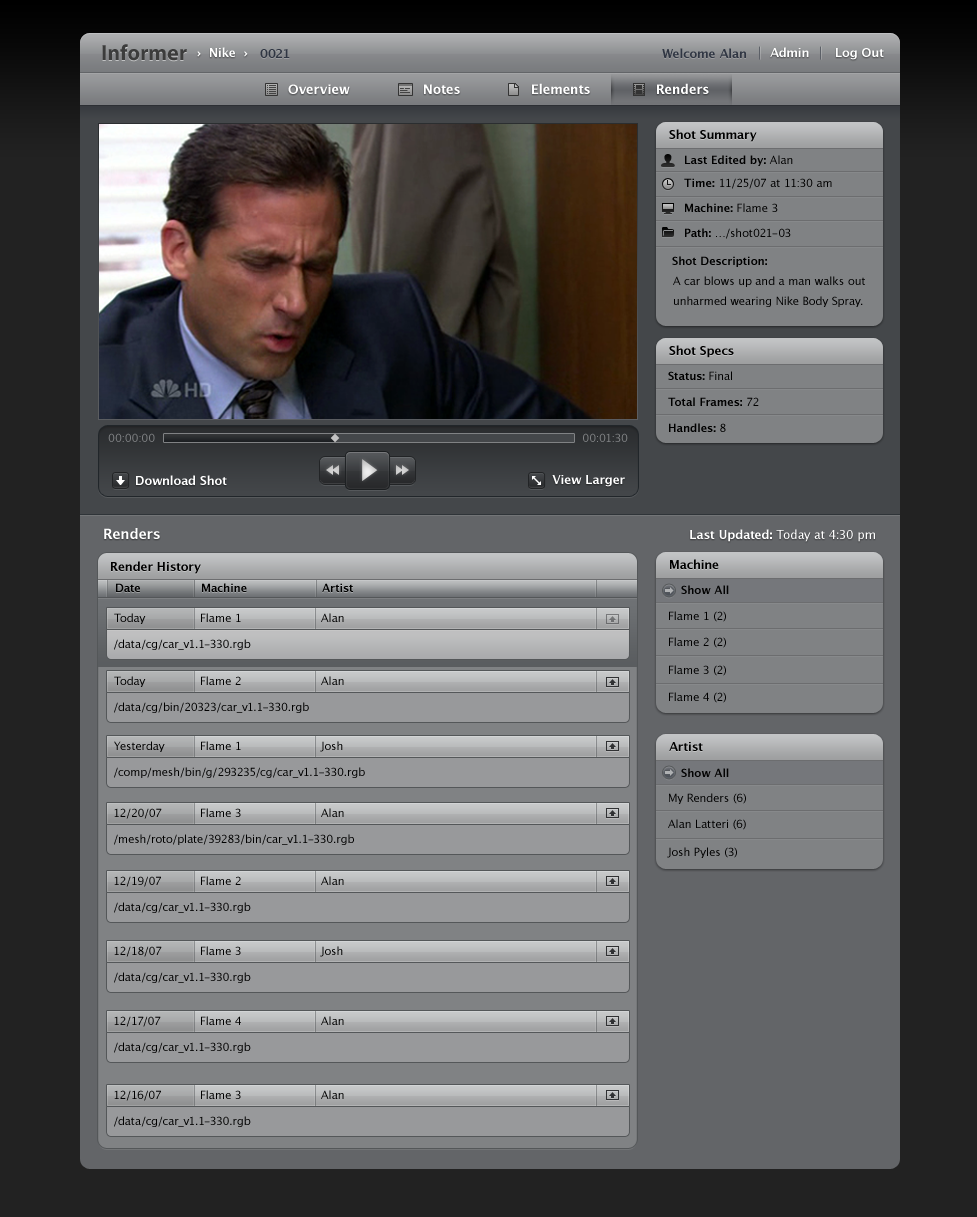
<style>
.page{position:relative;width:977px;height:1217px}
.page>*{position:absolute;margin:0}
.t1{font:22px "MyriadPro-Bold";color:#3c3c3c}
.t2{font:12px "LucidaGrande-Bold";color:#ffffff}
.t3{font:12px "LucidaGrande-Bold";color:#303643}
.t4{font:13px "LucidaGrande-Bold";color:#ffffff}
.t5{font:12px "LucidaGrande-Bold";color:#000000}
.t6{font:11px "LucidaGrande-Bold";color:#000000}
.t7{font:11px "LucidaGrande";color:#000000}
.t8{font:11px/19.6px "LucidaGrande";color:#000000}
.t9{font:11px "LucidaGrande";color:#808284}
.t10{font:14px "LucidaGrande-Bold";color:#ffffff}
.t11{font:12px "LucidaGrande";color:#ffffff}
.t12{font:11px "LucidaGrande-Bold";color:#020202}
</style>
<div class="page">
<p class="t1" style="left:102px;top:44px;width:85px;height:17px">Informer</p>
<p class="t2" style="left:197px;top:47px;width:51px;height:10px">›  Nike  ›</p>
<p class="t3" style="left:260px;top:49px;width:30px;height:9px">0021</p>
<p class="t3" style="left:662px;top:48px;width:84px;height:10px">Welcome Alan</p>
<p class="t2" style="left:770px;top:47px;width:39px;height:10px">Admin</p>
<p class="t2" style="left:836px;top:48px;width:48px;height:12px">Log Out</p>
<p class="t4" style="left:288px;top:84px;width:62px;height:10px">Overview</p>
<p class="t4" style="left:424px;top:84px;width:36px;height:10px">Notes</p>
<p class="t4" style="left:532px;top:83px;width:58px;height:11px">Elements</p>
<p class="t4" style="left:657px;top:83px;width:52px;height:11px">Renders</p>
<p class="t5" style="left:669px;top:129px;width:88px;height:13px">Shot Summary</p>
<p class="t6" style="left:685px;top:155px;width:108px;height:11px">Last Edited by:<span class="t7"> Alan</span></p>
<p class="t7" style="left:684px;top:178px;width:148px;height:11px"><span class="t6">Time: </span>11/25/07 at 11:30 am</p>
<p class="t6" style="left:685px;top:203px;width:93px;height:9px">Machine: <span class="t7">Flame 3</span></p>
<p class="t7" style="left:685px;top:228px;width:106px;height:11px"><span class="t6">Path: </span>…/shot021-03</p>
<p class="t6" style="left:672px;top:256px;width:95px;height:11px">Shot Description:</p>
<p class="t8" style="left:673px;top:276px;width:192px;height:31px">A car blows up and a man walks out unharmed wearing Nike Body Spray.</p>
<p class="t5" style="left:669px;top:345px;width:65px;height:13px">Shot Specs</p>
<p class="t6" style="left:668px;top:371px;width:64px;height:9px">Status:<span class="t7"> Final</span></p>
<p class="t6" style="left:668px;top:397px;width:91px;height:9px">Total Frames:<span class="t7"> 72</span></p>
<p class="t6" style="left:669px;top:423px;width:57px;height:9px">Handles:<span class="t7"> 8</span></p>
<p class="t9" style="left:108px;top:433px;width:47px;height:9px">00:00:00</p>
<p class="t9" style="left:583px;top:433px;width:45px;height:9px">00:01:30</p>
<p class="t2" style="left:136px;top:475px;width:91px;height:10px">Download Shot</p>
<p class="t2" style="left:552px;top:475px;width:73px;height:12px">View Larger</p>
<p class="t10" style="left:104px;top:528px;width:56px;height:11px">Renders</p>
<p class="t11" style="left:690px;top:529px;width:185px;height:13px"><span class="t2">Last Updated: </span>Today at 4:30 pm</p>
<p class="t5" style="left:111px;top:561px;width:90px;height:13px">Render History</p>
<p class="t5" style="left:670px;top:559px;width:49px;height:10px">Machine</p>
<p class="t6" style="left:116px;top:583px;width:24px;height:9px">Date</p>
<p class="t6" style="left:202px;top:583px;width:45px;height:9px">Machine</p>
<p class="t6" style="left:322px;top:583px;width:31px;height:9px">Artist</p>
<p class="t12" style="left:681px;top:585px;width:48px;height:9px">Show All</p>
<p class="t7" style="left:114px;top:613px;width:32px;height:11px">Today</p>
<p class="t7" style="left:201px;top:613px;width:40px;height:9px">Flame 1</p>
<p class="t7" style="left:321px;top:613px;width:23px;height:9px">Alan</p>
<p class="t7" style="left:669px;top:611px;width:57px;height:11px">Flame 1 (2)</p>
<p class="t7" style="left:114px;top:639px;width:137px;height:11px">/data/cg/car_v1.1-330.rgb</p>
<p class="t7" style="left:669px;top:637px;width:57px;height:11px">Flame 2 (2)</p>
<p class="t7" style="left:669px;top:665px;width:57px;height:11px">Flame 3 (2)</p>
<p class="t7" style="left:114px;top:676px;width:32px;height:11px">Today</p>
<p class="t7" style="left:201px;top:676px;width:40px;height:9px">Flame 2</p>
<p class="t7" style="left:321px;top:676px;width:23px;height:9px">Alan</p>
<p class="t7" style="left:114px;top:702px;width:195px;height:11px">/data/cg/bin/20323/car_v1.1-330.rgb</p>
<p class="t7" style="left:669px;top:692px;width:57px;height:11px">Flame 4 (2)</p>
<p class="t7" style="left:114px;top:741px;width:51px;height:11px">Yesterday</p>
<p class="t7" style="left:201px;top:741px;width:40px;height:9px">Flame 1</p>
<p class="t7" style="left:320px;top:741px;width:23px;height:11px">Josh</p>
<p class="t5" style="left:669px;top:742px;width:34px;height:9px">Artist</p>
<p class="t7" style="left:114px;top:767px;width:251px;height:11px">/comp/mesh/bin/g/293235/cg/car_v1.1-330.rgb</p>
<p class="t12" style="left:681px;top:768px;width:48px;height:9px">Show All</p>
<p class="t7" style="left:669px;top:793px;width:77px;height:11px">My Renders (6)</p>
<p class="t7" style="left:114px;top:808px;width:48px;height:11px">12/20/07</p>
<p class="t7" style="left:201px;top:808px;width:40px;height:9px">Flame 3</p>
<p class="t7" style="left:321px;top:808px;width:23px;height:9px">Alan</p>
<p class="t7" style="left:668px;top:819px;width:78px;height:11px">Alan Latteri (6)</p>
<p class="t7" style="left:114px;top:834px;width:240px;height:11px">/mesh/roto/plate/39283/bin/car_v1.1-330.rgb</p>
<p class="t7" style="left:667px;top:847px;width:70px;height:11px">Josh Pyles (3)</p>
<p class="t7" style="left:114px;top:876px;width:47px;height:11px">12/19/07</p>
<p class="t7" style="left:201px;top:876px;width:40px;height:9px">Flame 2</p>
<p class="t7" style="left:321px;top:876px;width:23px;height:9px">Alan</p>
<p class="t7" style="left:114px;top:902px;width:137px;height:11px">/data/cg/car_v1.1-330.rgb</p>
<p class="t7" style="left:114px;top:946px;width:48px;height:11px">12/18/07</p>
<p class="t7" style="left:201px;top:946px;width:40px;height:9px">Flame 3</p>
<p class="t7" style="left:320px;top:946px;width:23px;height:11px">Josh</p>
<p class="t7" style="left:114px;top:972px;width:137px;height:11px">/data/cg/car_v1.1-330.rgb</p>
<p class="t7" style="left:114px;top:1016px;width:47px;height:11px">12/17/07</p>
<p class="t7" style="left:201px;top:1016px;width:40px;height:9px">Flame 4</p>
<p class="t7" style="left:321px;top:1016px;width:23px;height:9px">Alan</p>
<p class="t7" style="left:114px;top:1042px;width:137px;height:11px">/data/cg/car_v1.1-330.rgb</p>
<p class="t7" style="left:114px;top:1090px;width:47px;height:11px">12/16/07</p>
<p class="t7" style="left:201px;top:1090px;width:40px;height:9px">Flame 3</p>
<p class="t7" style="left:321px;top:1090px;width:23px;height:9px">Alan</p>
<p class="t7" style="left:114px;top:1116px;width:137px;height:11px">/data/cg/car_v1.1-330.rgb</p>
</div>
